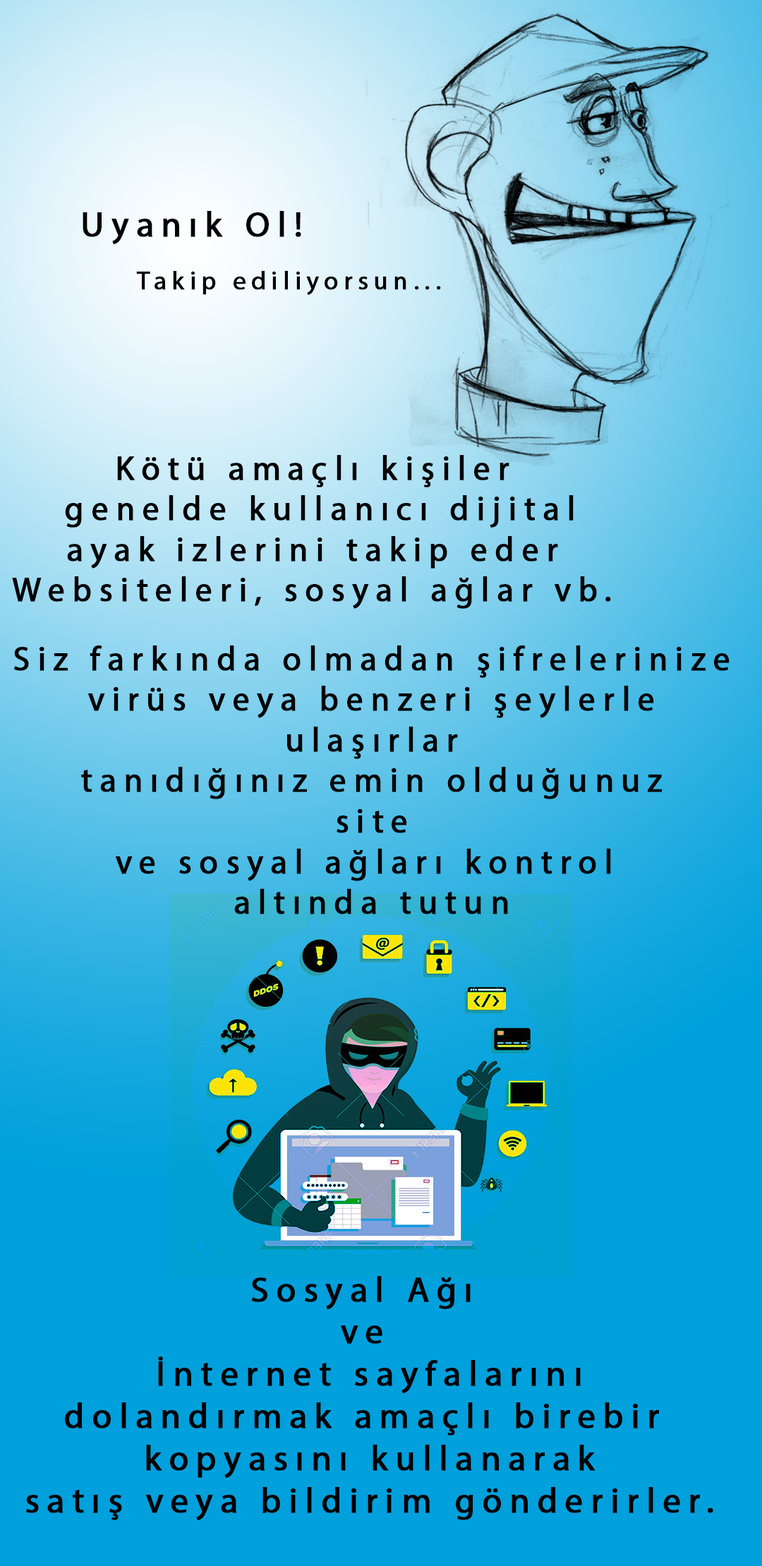
<style>
.page{position:relative;width:762px;height:1566px;background:#00a0dc}
.page>*{position:absolute;margin:0}
.t1{font:35.3px "MyriadPro-Regular";letter-spacing:0.2em;color:#000000;font-weight:bold}
.t2{font:25.4px "MyriadPro-Regular";letter-spacing:0.2em;color:#000000;font-weight:bold}
.t3{font:33.9px "MyriadPro-Regular";letter-spacing:0.2em;color:#000000;font-weight:bold}
</style>
<div class="page">
<p class="t1" style="left:83px;top:211px;width:218px;height:33px">Uyanık Ol!</p>
<p class="t2" style="left:136px;top:271px;width:305px;height:24px">Takip ediliyorsun...</p>
<p class="t3" style="left:12px;top:455px;width:599px;height:154px;text-align:center">Kötü amaçlı kişiler<br> genelde kullanıcı dijital<br>ayak izlerini takip eder<br>Websiteleri, sosyal ağlar vb.</p>
<p class="t3" style="left:14px;top:645px;width:715px;height:269px;text-align:center">Siz farkında olmadan şifrelerinize<br>virüs veya benzeri şeylerle<br>ulaşırlar<br>tanıdığınız emin olduğunuz<br>site<br>ve sosyal ağları kontrol <br>altında tutun</p>
<p class="t1" style="left:26px;top:1276px;width:687px;height:244px;text-align:center">Sosyal Ağı <br>ve <br>İnternet sayfalarını<br>dolandırmak amaçlı birebir <br>kopyasını kullanarak<br>satış veya bildirim gönderirler.</p>
</div>
